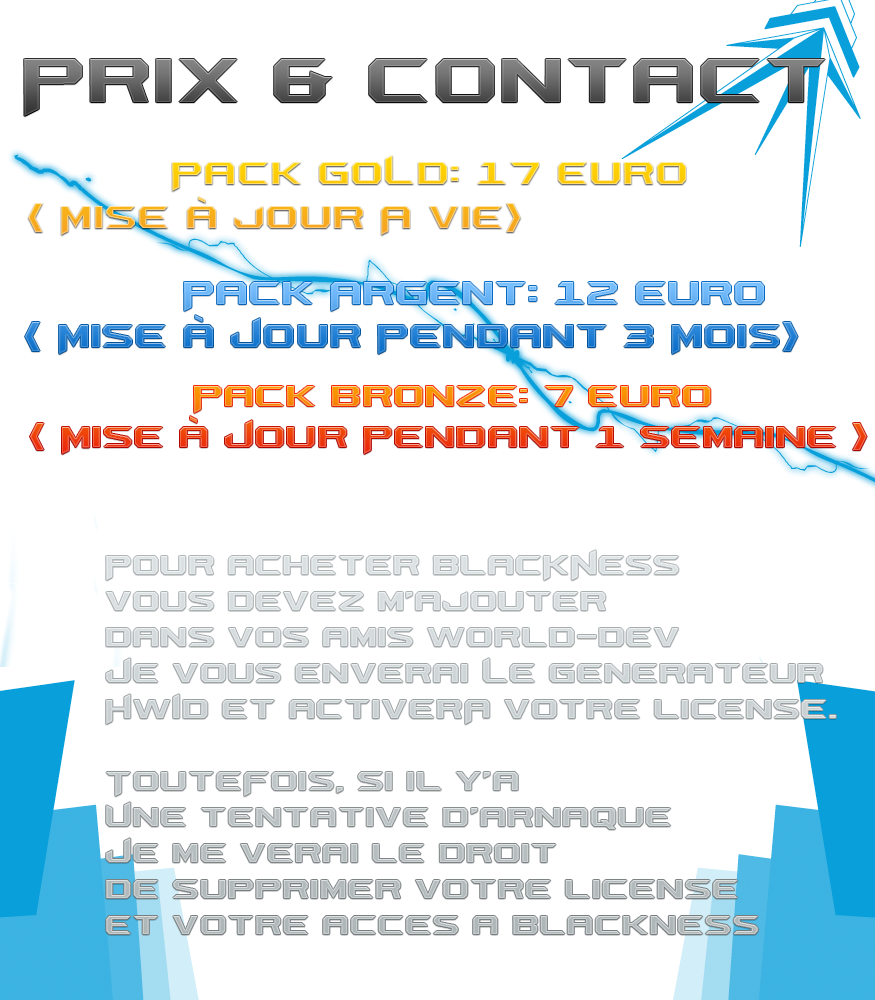
<style>
.page{position:relative;width:875px;height:1000px;background:#ffffff}
.page>*{position:absolute;margin:0}
.t1{font:72px "AeromaticsNC"}
.t2{font:36px "AeromaticsNC"}
.t3{font:34px "AeromaticsNC"}
.t4{font:30px "AeromaticsNC";color:#d3d8d9}
</style>
<div class="page">
<p class="t1" style="left:24px;top:59px;width:801px;height:57px">Prix &amp; Contact</p>
<p class="t2" style="left:28px;top:155px;width:658px;height:80px">Pack GOLD: 17 Euro<br>( Mise à jour A Vie)</p>
<p class="t2" style="left:25px;top:282px;width:773px;height:72px">Pack Argent: 12 Euro <br>( Mise à Jour Pendant 3 Mois)</p>
<p class="t3" style="left:30px;top:386px;width:837px;height:68px">Pack BronZE: 7 Euro<br>( Mise à Jour Pendant 1 Semaine )</p>
<p class="t4" style="left:106px;top:550px;width:730px;height:384px">Pour acheter BlacKNess<br>Vous devez m’ajouter <br>Dans vos amis World-Dev<br>Je vous enverai LE Generateur<br>HWID et activerA votre license. <br><br>TouteFois, si il y’a<br>Une tentative d’arnaque<br>Je me verai le droit <br>de Supprimer votre license<br>et votre acces a blackness</p>
</div>
